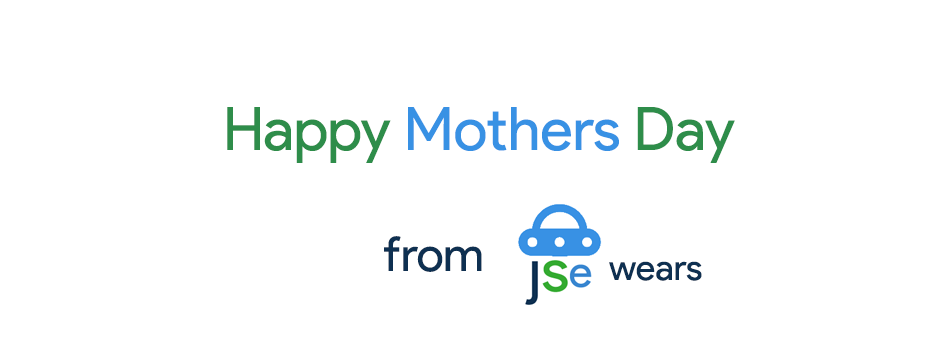
<style>
.page{position:relative;width:936px;height:360px;background:#ffffff}
.page>*{position:absolute;margin:0}
.t1{font:60px "ProductSans-Regular";color:#3891e4}
.t2{font:60px "ProductSans-Regular";color:#2e8d4a}
.t3{font:48px "ProductSans-Regular";color:#0e3051}
.t4{font:36px "ProductSans-Regular";color:#0e3051}
</style>
<div class="page">
<p class="t1" style="left:227px;top:107px;width:508px;height:56px"><span class="t2">Happy </span>Mothers<span class="t2"> Day</span></p>
<p class="t3" style="left:384px;top:236px;width:98px;height:36px">from</p>
<p class="t4" style="left:609px;top:261px;width:93px;height:20px">wears</p>
</div>
